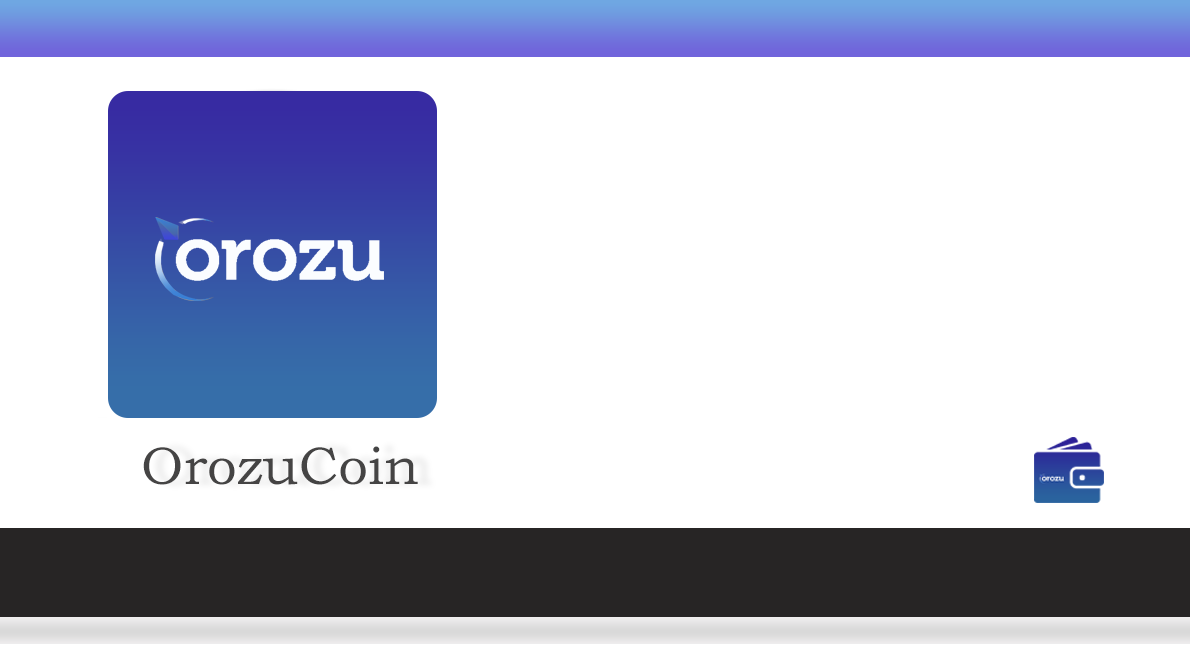
<style>
.page{position:relative;width:1190px;height:645px;background:#ffffff}
.page>*{position:absolute;margin:0}
.t1{font:53.3px "BookmanOldStyle";color:#454444}
</style>
<div class="page">
<p class="t1" style="left:143px;top:446px;width:275px;height:39px">OrozuCoin</p>
</div>
